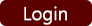
<style>
.page{position:relative;width:92px;height:26px;background:#5d0000}
.page>*{position:absolute;margin:0}
.t1{font:17.2px "MicrosoftJhengHeiUIRegular";color:#ffffff}
</style>
<div class="page">
<p class="t1" style="left:24px;top:6px;width:43px;height:19px">Login</p>
</div>
